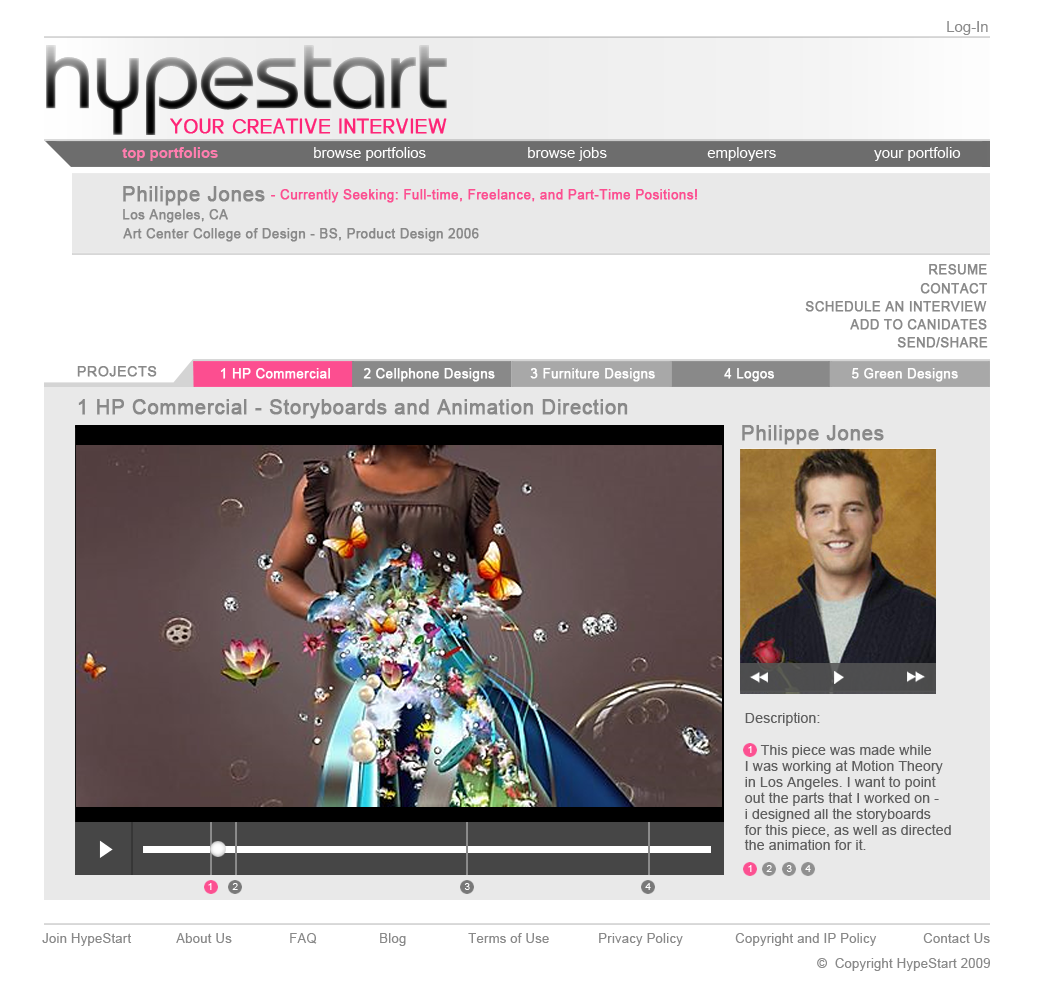
<style>
.page{position:relative;width:1051px;height:981px;background:#ffffff}
.page>*{position:absolute;margin:0}
.t1{font:14.9px "ArialMT";color:#898989}
.t2{font:20.1px "HeoMay11";letter-spacing:0.02em;color:#fe2577;font-weight:bold}
.t3{font:14.9px "Arial-BoldMT";color:#ff7eaf}
.t4{font:14.9px "ArialMT";color:#ffffff}
.t5{font:20.1px "ArialMT";letter-spacing:0.02em;color:#898989;font-weight:bold}
.t6{font:13.1px "ArialMT";letter-spacing:0.02em;color:#fc4e90;font-weight:bold}
.t7{font:13px "ArialMT";letter-spacing:0.02em;color:#898989;font-weight:bold}
.t8{font:14.1px "ArialMT";letter-spacing:0.02em;color:#898989;font-weight:bold}
.t9{font:13px "ArialMT";letter-spacing:0.02em;color:#ffffff;font-weight:bold}
.t10{font:14.3px/16px "ArialMT";color:#5f5f5f}
.t11{font:9.6px "ArialMT";color:#ffffff}
.t12{font:13px "ArialMT";letter-spacing:0.02em;color:#898989}
</style>
<div class="page">
<p class="t1" style="left:947px;top:21px;width:41px;height:14px">Log-In</p>
<p class="t2" style="left:170px;top:118px;width:277px;height:16px">YOUR CREATIVE INTERVIEW</p>
<p class="t3" style="left:122px;top:147px;width:96px;height:14px">top portfolios</p>
<p class="t4" style="left:314px;top:147px;width:112px;height:14px">browse portfolios</p>
<p class="t4" style="left:528px;top:147px;width:79px;height:14px">browse jobs</p>
<p class="t4" style="left:707px;top:147px;width:69px;height:14px">employers</p>
<p class="t4" style="left:874px;top:147px;width:87px;height:14px">your portfolio</p>
<p class="t5" style="left:123px;top:186px;width:142px;height:20px">Philippe Jones</p>
<p class="t6" style="left:271px;top:189px;width:426px;height:14px">- Currently Seeking: Full-time, Freelance, and Part-Time Positions!</p>
<p class="t7" style="left:123px;top:209px;width:105px;height:14px">Los Angeles, CA</p>
<p class="t7" style="left:123px;top:228px;width:356px;height:14px">Art Center College of Design - BS, Product Design 2006</p>
<p class="t7" style="left:929px;top:264px;width:58px;height:11px">RESUME</p>
<p class="t7" style="left:920px;top:283px;width:68px;height:11px">CONTACT</p>
<p class="t7" style="left:805px;top:301px;width:182px;height:11px">SCHEDULE AN INTERVIEW</p>
<p class="t7" style="left:850px;top:319px;width:137px;height:11px">ADD TO CANIDATES</p>
<p class="t7" style="left:897px;top:337px;width:91px;height:11px">SEND/SHARE</p>
<p class="t8" style="left:77px;top:366px;width:80px;height:11px">PROJECTS</p>
<p class="t9" style="left:221px;top:368px;width:109px;height:11px">1 HP Commercial</p>
<p class="t9" style="left:363px;top:368px;width:132px;height:14px">2 Cellphone Designs</p>
<p class="t9" style="left:530px;top:368px;width:125px;height:14px">3 Furniture Designs</p>
<p class="t9" style="left:724px;top:368px;width:50px;height:14px">4 Logos</p>
<p class="t9" style="left:852px;top:368px;width:106px;height:14px">5 Green Designs</p>
<p class="t5" style="left:78px;top:399px;width:550px;height:20px">1 HP Commercial - Storyboards and Animation Direction</p>
<p class="t5" style="left:742px;top:425px;width:142px;height:20px">Philippe Jones</p>
<p class="t10" style="left:744px;top:712px;width:207px;height:138px">Description:<br><br>    This piece was made while<br>I was working at Motion Theory<br>in Los Angeles. I want to point<br>out the parts that I worked on -<br>i designed all the storyboards <br>for this piece, as well as directed<br>the animation for it.</p>
<p class="t11" style="left:748px;top:746px;width:4px;height:7px">1</p>
<p class="t11" style="left:748px;top:865px;width:4px;height:7px">1</p>
<p class="t11" style="left:766px;top:865px;width:6px;height:7px">2</p>
<p class="t11" style="left:786px;top:865px;width:6px;height:7px">3</p>
<p class="t11" style="left:805px;top:865px;width:6px;height:7px">4</p>
<p class="t11" style="left:208px;top:883px;width:4px;height:7px">1</p>
<p class="t11" style="left:232px;top:883px;width:6px;height:7px">2</p>
<p class="t11" style="left:464px;top:883px;width:6px;height:7px">3</p>
<p class="t11" style="left:645px;top:883px;width:6px;height:7px">4</p>
<p class="t12" style="left:42px;top:933px;width:90px;height:13px">Join HypeStart</p>
<p class="t12" style="left:176px;top:933px;width:56px;height:10px">About Us</p>
<p class="t12" style="left:290px;top:933px;width:27px;height:11px">FAQ</p>
<p class="t12" style="left:380px;top:933px;width:26px;height:13px">Blog</p>
<p class="t12" style="left:468px;top:933px;width:81px;height:10px">Terms of Use</p>
<p class="t12" style="left:599px;top:933px;width:84px;height:13px">Privacy Policy</p>
<p class="t12" style="left:735px;top:933px;width:142px;height:13px">Copyright and IP Policy</p>
<p class="t12" style="left:923px;top:933px;width:67px;height:10px">Contact Us</p>
<p class="t12" style="left:817px;top:958px;width:173px;height:13px">©  Copyright HypeStart 2009</p>
</div>
